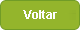
<style>
.page{position:relative;width:80px;height:30px;background:#94b52c}
.page>*{position:absolute;margin:0}
.t1{font:12px "Arial-BoldMT";color:#fefefe}
</style>
<div class="page">
<p class="t1" style="left:23px;top:10px;width:34px;height:9px">Voltar</p>
</div>
